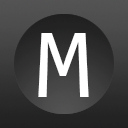
<style>
.page{position:relative;width:128px;height:128px}
.page>*{position:absolute;margin:0}
.t1{font:100px "Consolas";color:#ffffff}
</style>
<div class="page">
<p class="t1" style="left:38px;top:33px;width:51px;height:64px">M</p>
</div>
